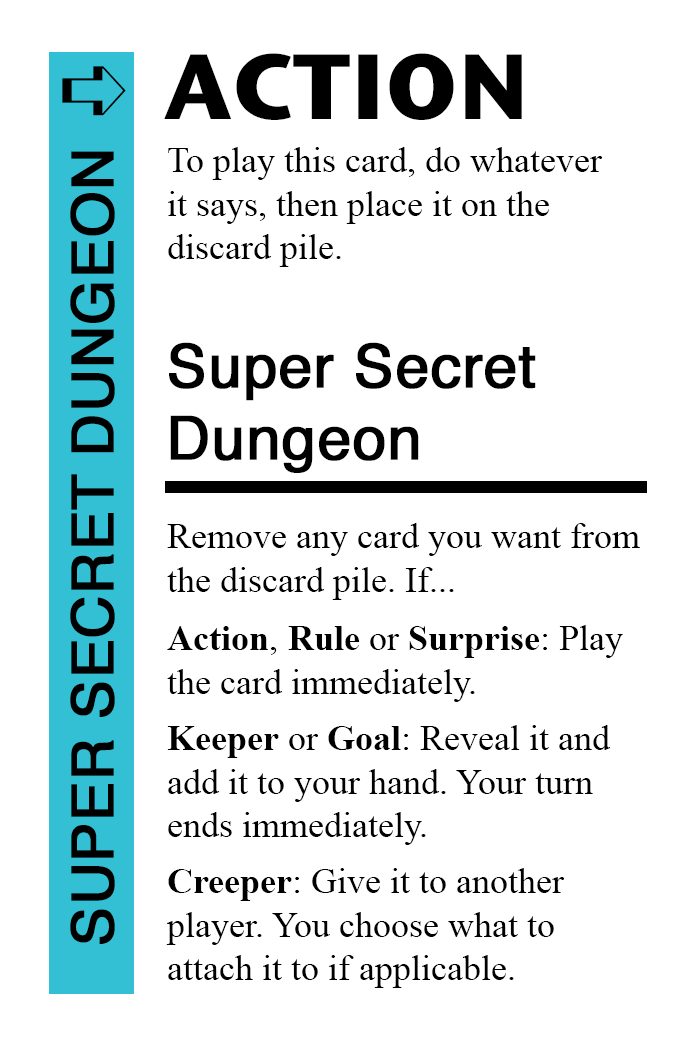
<style>
.page{position:relative;width:700px;height:1042px;background:#ffffff}
.page>*{position:absolute;margin:0}
.t1{font:92px "StoneSansITC-Bold";color:#000000}
.t2{font:82px "MS-Gothic";color:#000000}
.t3{font:36px "TimesNewRomanPSMT";color:#000000}
.t4{font:58px "Helvetica";color:#000000;font-weight:bold}
.t5{font:60px "Helvetica";color:#000000;font-weight:bold}
.t6{font:36px "TimesNewRomanPS-BoldMT";color:#000000}
</style>
<div class="page">
<p class="t1" style="left:164px;top:53px;width:358px;height:67px">ACTION</p>
<p class="t2" style="left:62px;top:66px;width:64px;height:50px">➪</p>
<p class="t3" style="left:168px;top:147px;width:435px;height:120px">To play this card, do whatever<br>it says, then place it on the<br>discard pile.</p>
<p class="t4" style="left:70px;top:151px;width:45px;height:793px;rotate:-90deg">SUPER SECRET DUNGEON</p>
<p class="t5" style="left:169px;top:342px;width:367px;height:131px">Super Secret<br>Dungeon</p>
<p class="t3" style="left:167px;top:523px;width:473px;height:77px">Remove any card you want from<br>the discard pile. If...</p>
<p class="t3" style="left:167px;top:625px;width:456px;height:77px"><span class="t6">Action</span>, <span class="t6">Rule</span> or <span class="t6">Surprise</span>: Play<br>the card immediately.</p>
<p class="t3" style="left:167px;top:725px;width:444px;height:120px"><span class="t6">Keeper</span> or <span class="t6">Goal</span>: Reveal it and<br>add it to your hand. Your turn<br>ends immediately.</p>
<p class="t3" style="left:166px;top:868px;width:399px;height:120px"><span class="t6">Creeper</span>: Give it to another <br>player. You choose what to<br>attach it to if applicable.</p>
</div>
